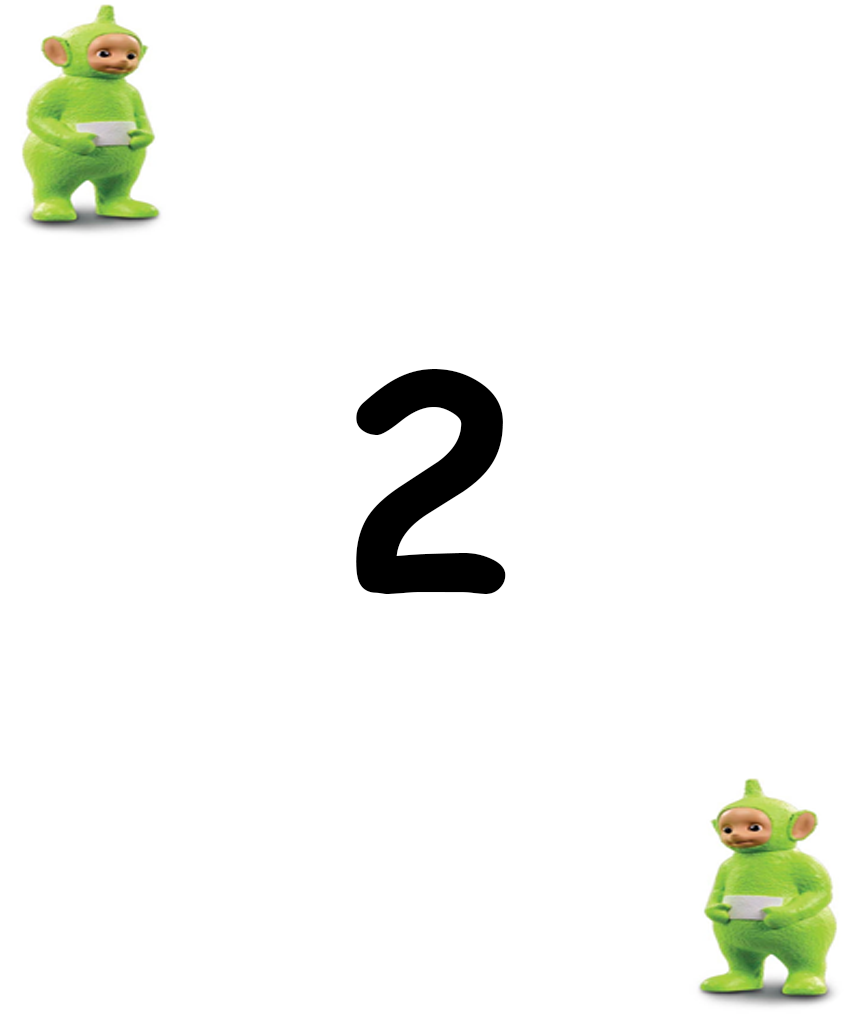
<style>
.page{position:relative;width:859px;height:1020px;background:#ffffff}
.page>*{position:absolute;margin:0}
.t1{font:300px "ComicSansMS-Bold";color:#000000;font-variant:small-caps}
</style>
<div class="page">
<p class="t1" style="left:356px;top:369px;width:150px;height:225px">2</p>
</div>
